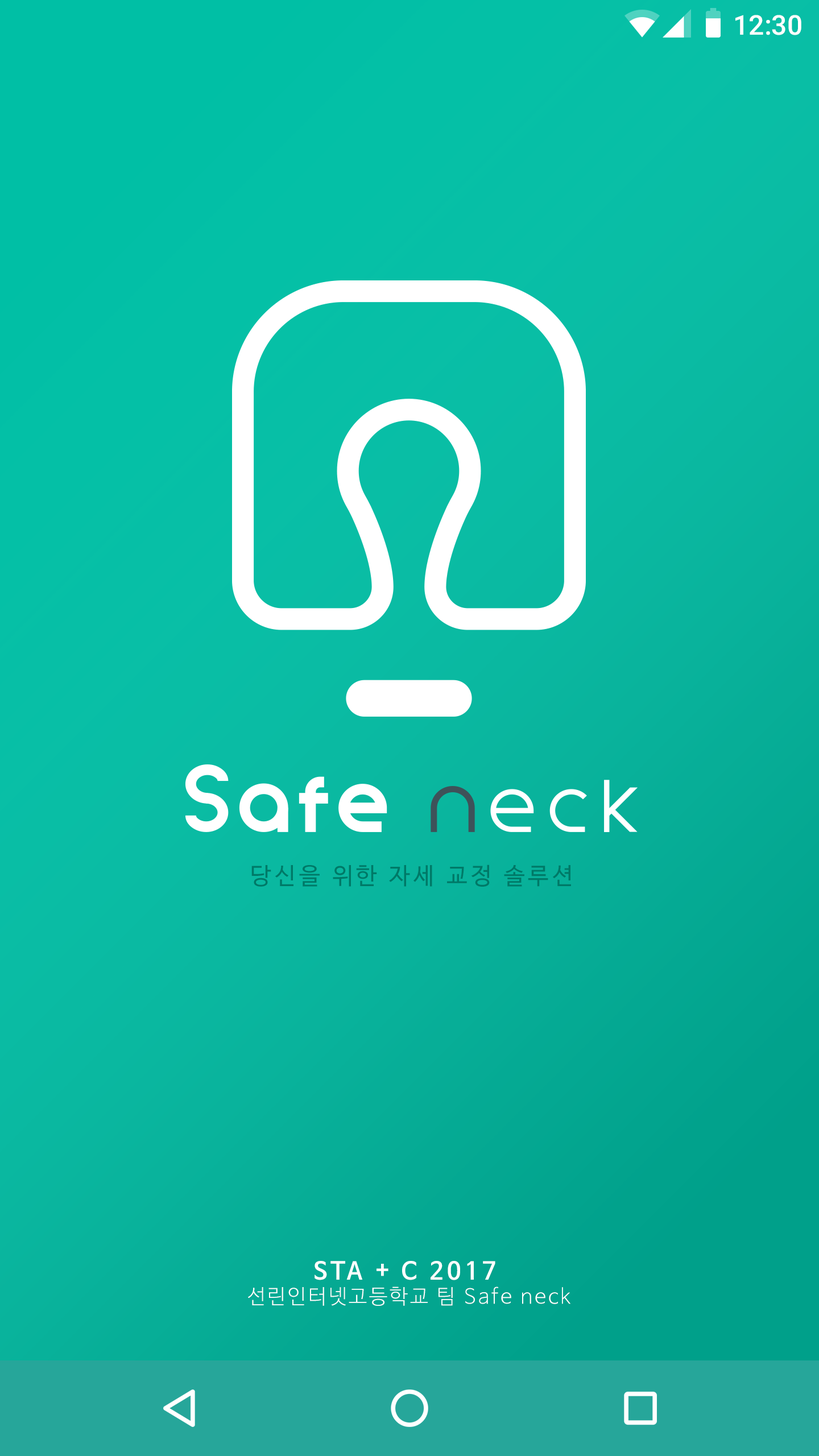
<style>
.page{position:relative;width:819px;height:1456px}
.page>*{position:absolute;margin:0}
.t1{font:27.3px "Roboto-Medium";color:#ffffff}
.t2{font:23.2px "NanumBarunGothic";letter-spacing:0.15em;color:#007967}
.t3{font:20.5px "NanumBarunGothicLight";letter-spacing:0.1em;color:#ffffff}
.t4{font:23.9px "NanumBarunGothicBold";letter-spacing:0.15em;color:#ffffff}
</style>
<div class="page">
<p class="t1" style="left:735px;top:15px;width:66px;height:20px">12:30</p>
<p class="t2" style="left:251px;top:864px;width:320px;height:23px">당신을 위한 자세 교정 솔루션</p>
<p class="t3" style="left:248px;top:1261px;width:322px;height:45px;text-align:center"><span class="t4">STA + C 2017 <br></span>선린인터넷고등학교 팀 Safe neck</p>
</div>
